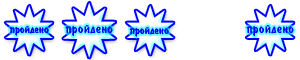
<style>
.page{position:relative;width:300px;height:60px;background:#ffffff}
.page>*{position:absolute;margin:0}
.t1{font:12px "BrushType-Bold";letter-spacing:0.03em;color:#0000ff}
.t2{font:14px "BrushType-Bold";letter-spacing:0.05em;color:#0000ff}
</style>
<div class="page">
<p class="t1" style="left:10px;top:26px;width:39px;height:10px">ïðîéäåíî</p>
<p class="t2" style="left:65px;top:25px;width:48px;height:11px">ïðîéäåíî</p>
<p class="t1" style="left:130px;top:27px;width:39px;height:10px">ïðîéäåíî</p>
<p class="t2" style="left:246px;top:25px;width:48px;height:11px">ïðîéäåíî</p>
</div>
